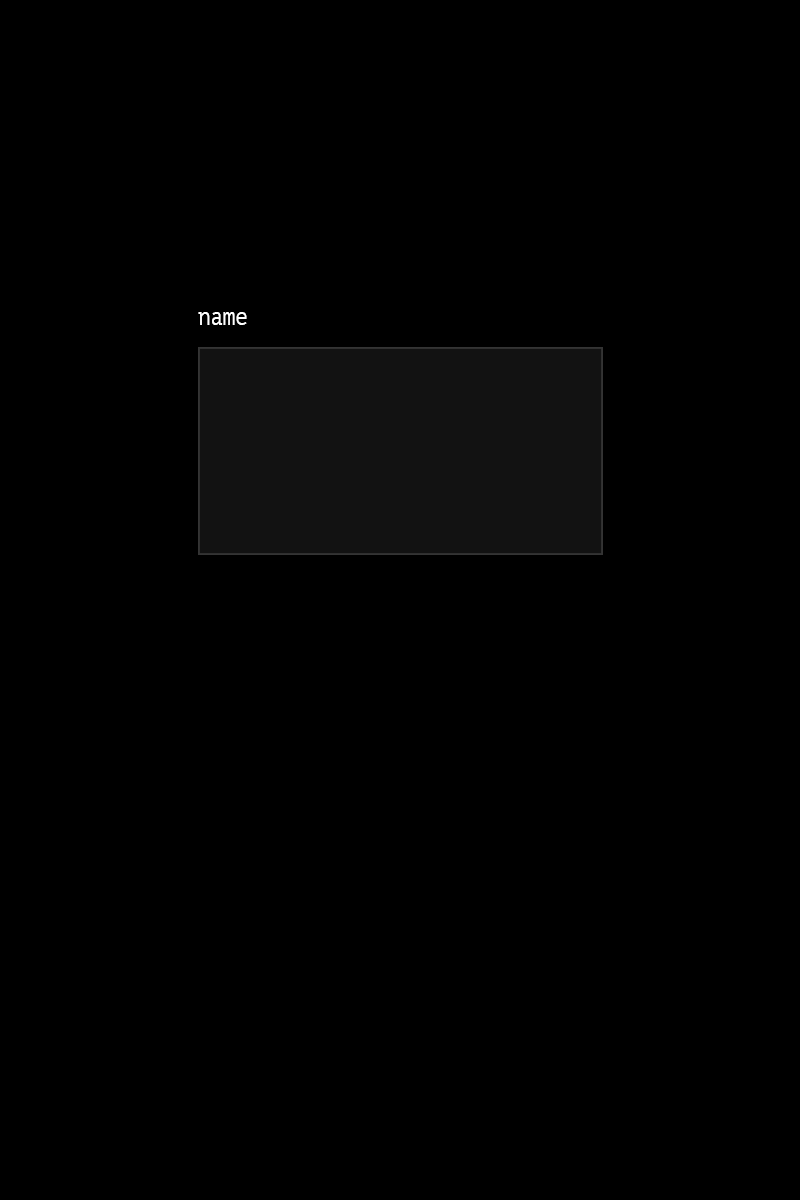
<style>
.page{position:relative;width:800px;height:1200px;background:#000000}
.page>*{position:absolute;margin:0}
.t1{font:24.8px "PTMono-Regular";color:#ffffff;scale:0.83 1}
</style>
<div class="page">
<p class="t1" style="left:198px;top:312px;width:49px;height:13px">name</p>
</div>
